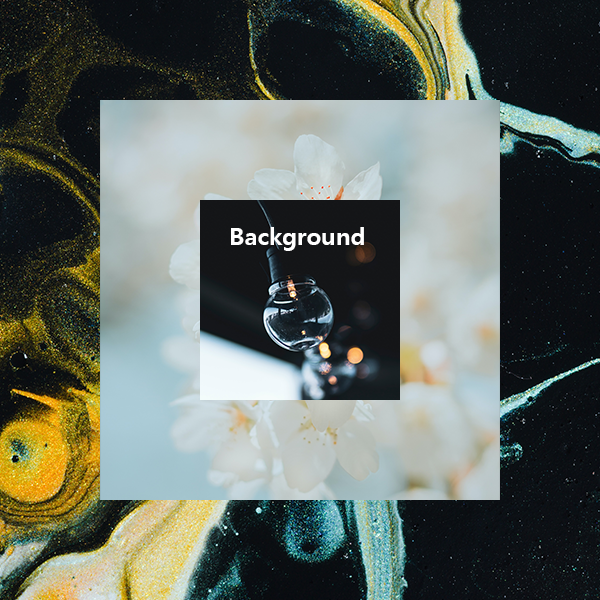
<style>
.page{position:relative;width:600px;height:600px}
.page>*{position:absolute;margin:0}
.t1{font:24px "MalgunGothicBold";color:#ffffff}
</style>
<div class="page">
<p class="t1" style="left:231px;top:227px;width:133px;height:24px">Background</p>
</div>
